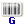
<style>
.page{position:relative;width:24px;height:24px;background:#ffffff}
.page>*{position:absolute;margin:0}
.t1{font:10px "Tahoma-Bold";color:#1304a3}
</style>
<div class="page">
<p class="t1" style="left:9px;top:17px;width:6px;height:7px">G</p>
</div>
